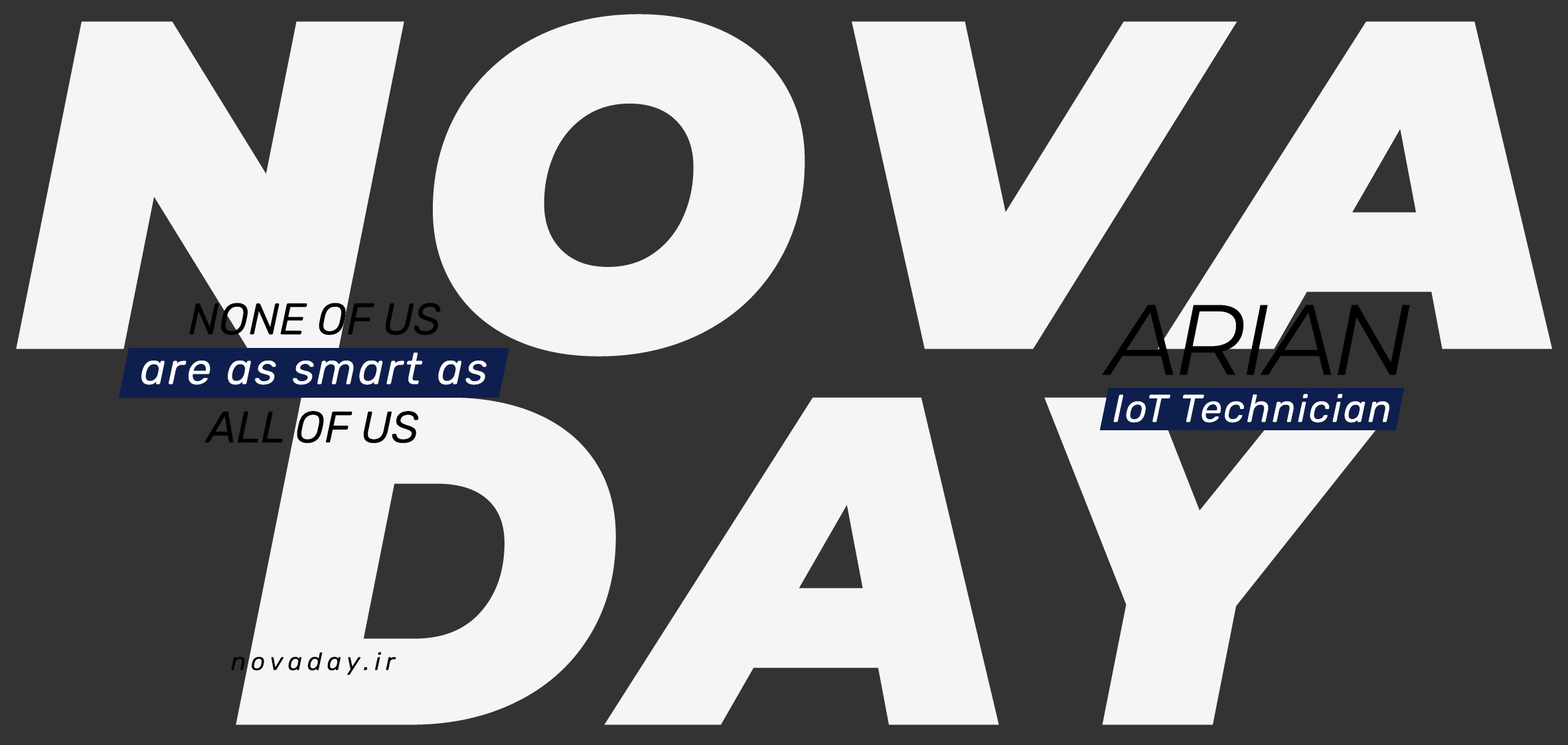
<style>
.page{position:relative;width:1568px;height:745px;background:#333333}
.page>*{position:absolute;margin:0}
.t1{font:467.1px/375.8px "Montserrat-BlackItalic";letter-spacing:0.05em;color:#f5f5f5}
.t2{font:44.3px "Rubik-Italic";color:#000000}
.t3{font:99.6px "Montserrat-Italic";letter-spacing:-0.05em;color:#000000}
.t4{font:44.3px "Rubik-Italic";letter-spacing:0.05em;color:#ffffff}
.t5{font:38.7px "Rubik-Italic";letter-spacing:0.05em;color:#ffffff}
.t6{font:24.9px "Rubik-Italic";letter-spacing:0.2em;color:#000000}
</style>
<div class="page">
<p class="t1" style="left:16px;top:14px;width:1536px;height:711px;text-align:center">NOVA<br>DAY</p>
<p class="t2" style="left:189px;top:303px;width:252px;height:32px">NONE OF US</p>
<p class="t3" style="left:1102px;top:305px;width:308px;height:70px">ARIAN</p>
<p class="t4" style="left:141px;top:353px;width:346px;height:32px">are as smart as</p>
<p class="t5" style="left:1113px;top:394px;width:276px;height:29px">IoT Technician</p>
<p class="t2" style="left:205px;top:411px;width:214px;height:32px">ALL OF US</p>
<p class="t6" style="left:231px;top:652px;width:165px;height:23px">novaday.ir</p>
</div>
